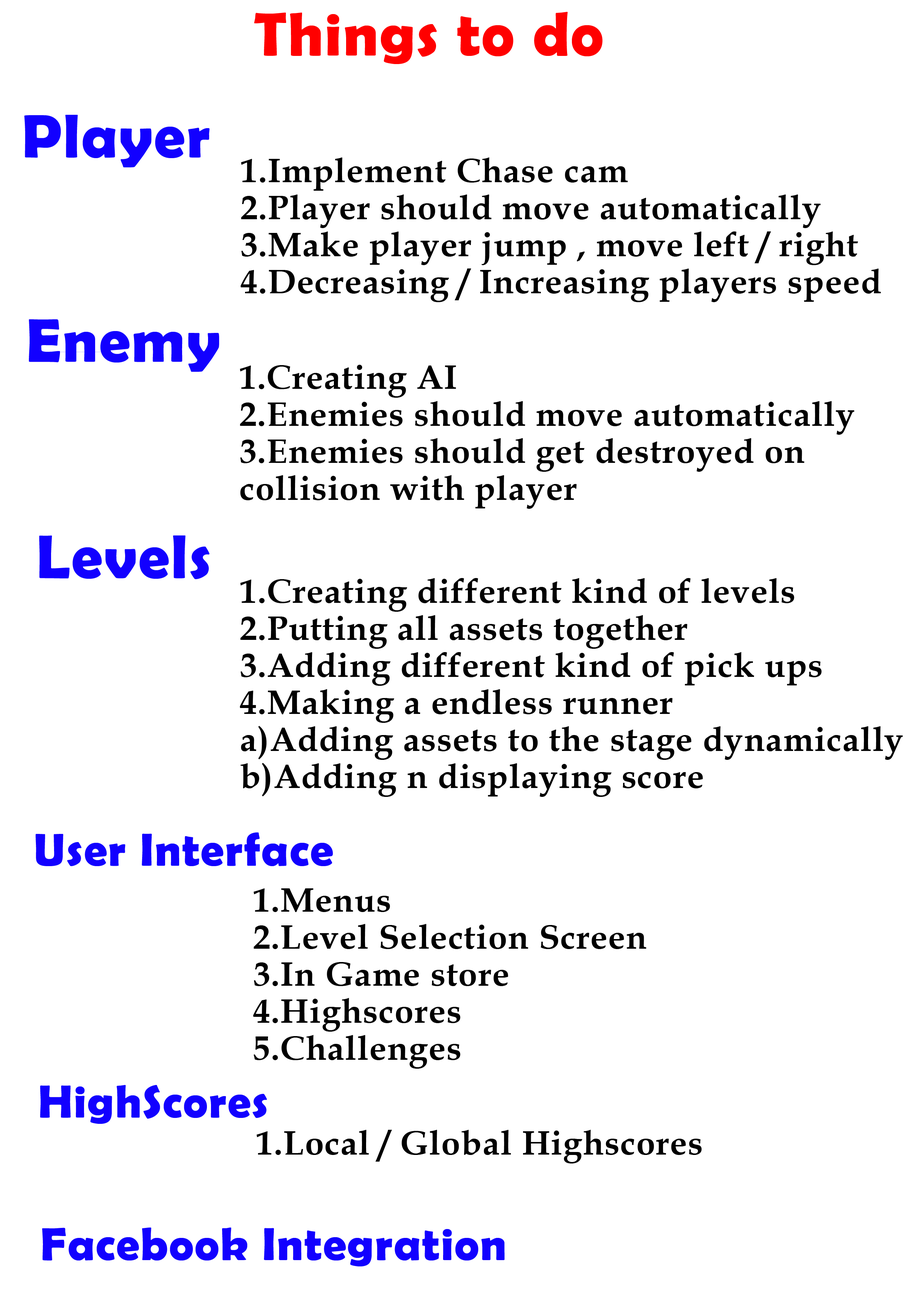
<style>
.page{position:relative;width:918px;height:1299px;background:#ffffff}
.page>*{position:absolute;margin:0}
.t1{font:61.7px "BerlinSansFBDemi-Bold";letter-spacing:0.025em;color:#ff0000}
.t2{font:61.7px "BerlinSansFBDemi-Bold";letter-spacing:0.025em;color:#1200ff}
.t3{font:33.9px/12.3px "BookAntiqua-Bold";letter-spacing:0.025em;color:#000000}
.t4{font:46.3px "BerlinSansFBDemi-Bold";letter-spacing:0.025em;color:#1200ff}
.t5{font:33.9px "BookAntiqua-Bold";letter-spacing:0.025em;color:#000000}
</style>
<div class="page">
<p class="t1" style="left:254px;top:12px;width:349px;height:52px">Things to do</p>
<p class="t2" style="left:24px;top:115px;width:186px;height:52px">Player</p>
<p class="t3" style="left:241px;top:157px;width:640px;height:145px">1.Implement Chase cam<br><br><br>2.Player should move automatically<br><br><br>3.Make player jump , move left / right<br><br><br>4.Decreasing / Increasing players speed</p>
<p class="t2" style="left:29px;top:319px;width:190px;height:53px">Enemy</p>
<p class="t3" style="left:240px;top:365px;width:614px;height:144px">1.Creating AI <br><br><br>2.Enemies should move automatically<br><br><br>3.Enemies should get destroyed on <br><br><br>collision with player</p>
<p class="t2" style="left:39px;top:535px;width:171px;height:44px">Levels</p>
<p class="t3" style="left:240px;top:578px;width:663px;height:219px">1.Creating different kind of levels<br><br><br>2.Putting all assets together<br><br><br>3.Adding different kind of pick ups <br><br><br>4.Making a endless runner<br><br><br>a)Adding assets to the stage dynamically<br><br><br>b)Adding n displaying score</p>
<p class="t4" style="left:36px;top:832px;width:297px;height:34px">User Interface</p>
<p class="t3" style="left:253px;top:888px;width:393px;height:180px">1.Menus  <br><br><br>2.Level Selection Screen<br><br><br>3.In Game store<br><br><br>4.Highscores<br><br><br>5.Challenges</p>
<p class="t4" style="left:40px;top:1085px;width:227px;height:39px">HighScores</p>
<p class="t5" style="left:257px;top:1130px;width:445px;height:33px">1.Local / Global Highscores</p>
<p class="t4" style="left:42px;top:1227px;width:463px;height:39px">Facebook Integration</p>
</div>
